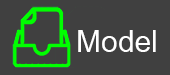
<style>
.page{position:relative;width:170px;height:75px;background:#404040}
.page>*{position:absolute;margin:0}
.t1{font:30px "ArialUnicodeMS";color:#ffffff}
</style>
<div class="page">
<p class="t1" style="left:78px;top:30px;width:78px;height:22px">Model</p>
</div>
